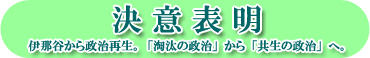
<style>
.page{position:relative;width:370px;height:58px;background:#99ff99}
.page>*{position:absolute;margin:0}
.t1{font:30px "HGPMinchoE";color:#006666}
.t2{font:12px "HGPMinchoE";color:#006666}
</style>
<div class="page">
<p class="t1" style="left:113px;top:5px;width:148px;height:29px">決 意 表 明</p>
<p class="t2" style="left:28px;top:40px;width:316px;height:12px">伊那谷から政治再生。「淘汰の政治」から「共生の政治」へ。</p>
</div>
